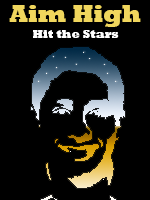
<style>
.page{position:relative;width:150px;height:200px;background:#000000}
.page>*{position:absolute;margin:0}
.t1{font:24px "Rockwell-ExtraBold";color:#f0d65d}
.t2{font:12px "Rockwell-ExtraBold";color:#ffffff}
</style>
<div class="page">
<p class="t1" style="left:9px;top:5px;width:132px;height:22px">Aim High</p>
<p class="t2" style="left:33px;top:30px;width:86px;height:8px">Hit the Stars</p>
</div>
